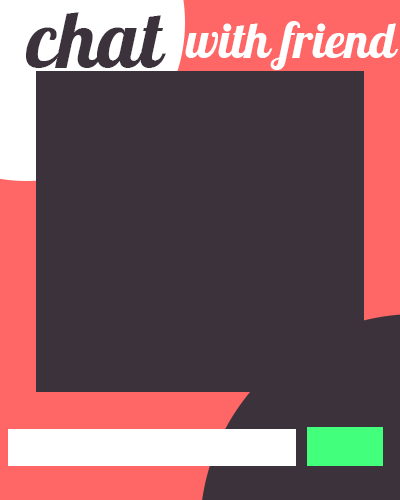
<style>
.page{position:relative;width:400px;height:500px;background:#3b323b}
.page>*{position:absolute;margin:0}
.t1{font:80.8px "Pattaya-Regular";color:#3b323b}
.t2{font:49.5px "Pattaya-Regular";color:#ffffff}
</style>
<div class="page">
<p class="t1" style="left:25px;top:12px;width:141px;height:56px">chat</p>
<p class="t2" style="left:185px;top:21px;width:214px;height:49px">with friend</p>
</div>
